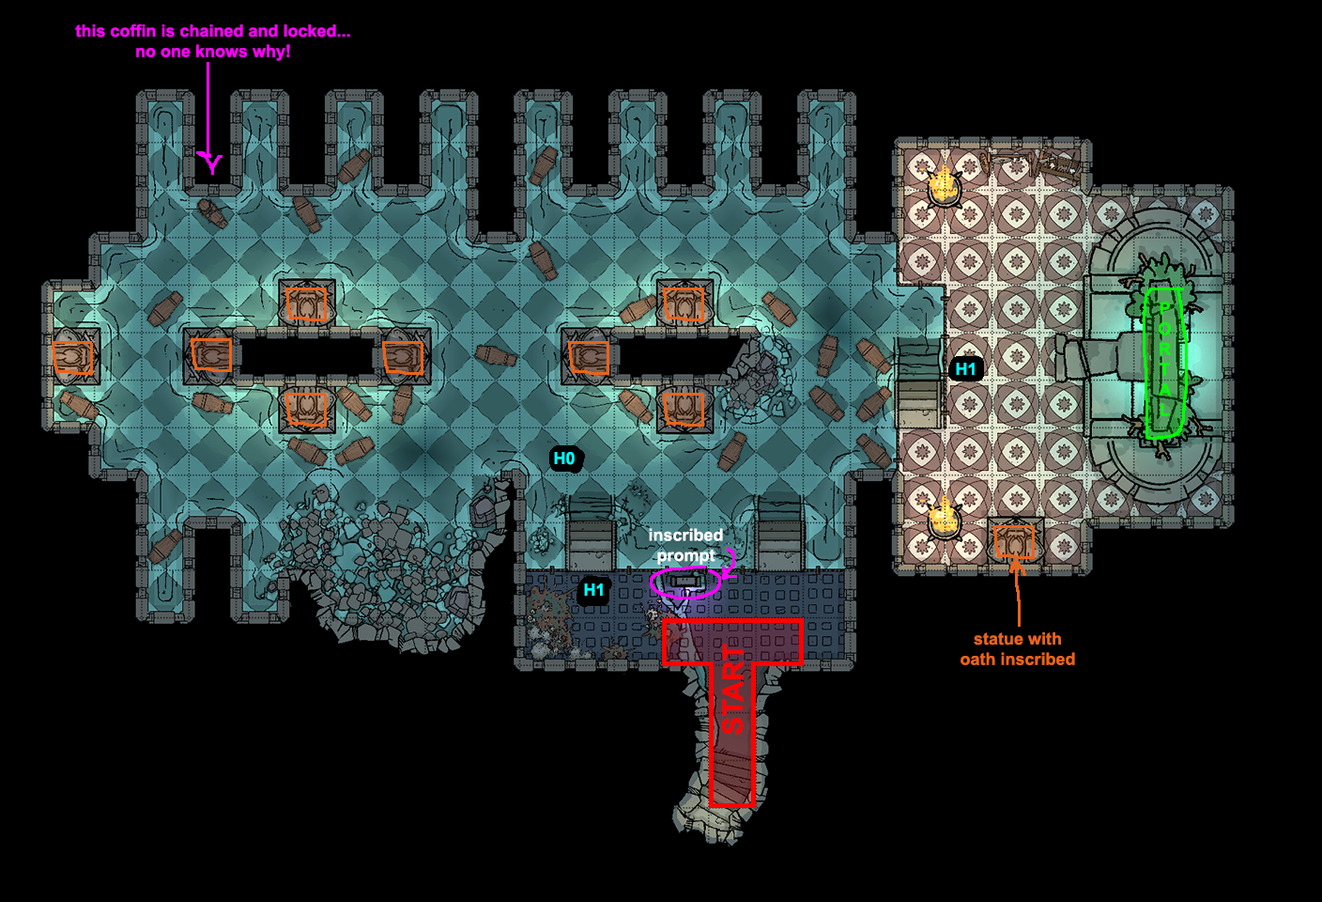
<style>
.page{position:relative;width:1322px;height:902px;background:#000000}
.page>*{position:absolute;margin:0}
.t1{font:16.9px "Arial-BoldMT";color:#ff00ff}
.t2{font:16.9px "Arial-BoldMT";color:#00ff00}
.t3{font:16.9px "Arial-BoldMT";color:#00ffff}
.t4{font:16.9px "Arial-BoldMT";color:#ffffff}
.t5{font:16.9px "Arial-BoldMT";color:#e8641b}
.t6{font:28.2px "Arial-BoldMT";color:#ff0000}
</style>
<div class="page">
<p class="t1" style="left:75px;top:23px;width:275px;height:38px;text-align:center">this coffin is chained and locked...<br>no one knows why!</p>
<p class="t2" style="left:1159px;top:301px;width:13px;height:115px;text-align:center">P<br>O<br>R<br>T<br>A<br>L</p>
<p class="t3" style="left:956px;top:363px;width:19px;height:12px">H1</p>
<p class="t3" style="left:554px;top:452px;width:21px;height:13px">H0</p>
<p class="t4" style="left:649px;top:528px;width:74px;height:36px;text-align:center">inscribed<br>prompt</p>
<p class="t3" style="left:584px;top:583px;width:19px;height:12px">H1</p>
<p class="t5" style="left:961px;top:632px;width:114px;height:33px;text-align:center">statue with<br>oath inscribed</p>
<p class="t6" style="left:721px;top:643px;width:23px;height:91px;rotate:-90deg">START</p>
</div>
